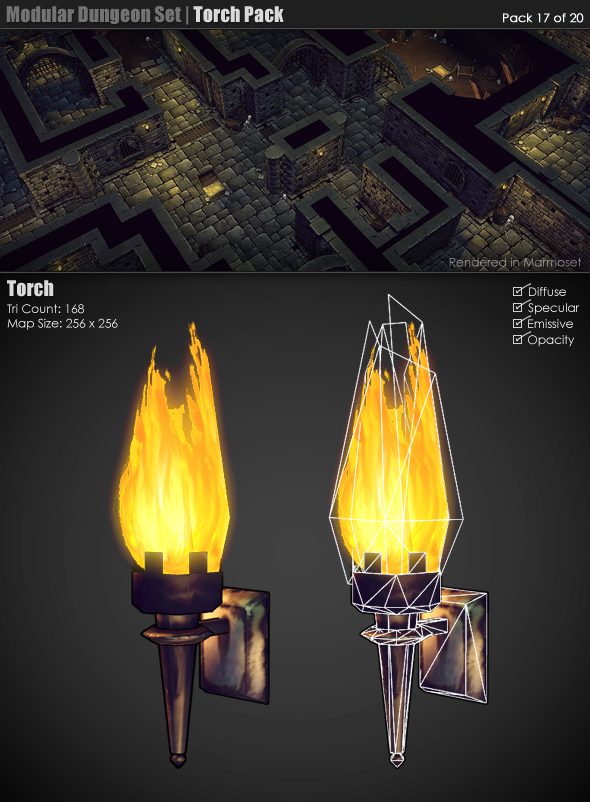
<style>
.page{position:relative;width:590px;height:802px}
.page>*{position:absolute;margin:0}
.t1{font:20px "Impact";color:#737373}
.t2{font:20px "Impact";color:#dadada}
.t3{font:12px "CenturyGothic";color:#ffffff;font-weight:bold}
.t4{font:12px "CenturyGothic";color:#a0a09c}
.t5{font:12px "CenturyGothic";color:#ffffff}
</style>
<div class="page">
<p class="t1" style="left:6px;top:6px;width:278px;height:19px">Modular Dungeon Set |<span class="t2"> Torch Pack</span></p>
<p class="t3" style="left:503px;top:13px;width:81px;height:10px">Pack 17 of 20</p>
<p class="t4" style="left:449px;top:257px;width:132px;height:10px">Rendered in Marmoset</p>
<p class="t2" style="left:7px;top:280px;width:47px;height:17px">Torch</p>
<p class="t5" style="left:7px;top:304px;width:111px;height:26px">Tri Count: 168<br>Map Size: 256 x 256</p>
</div>
